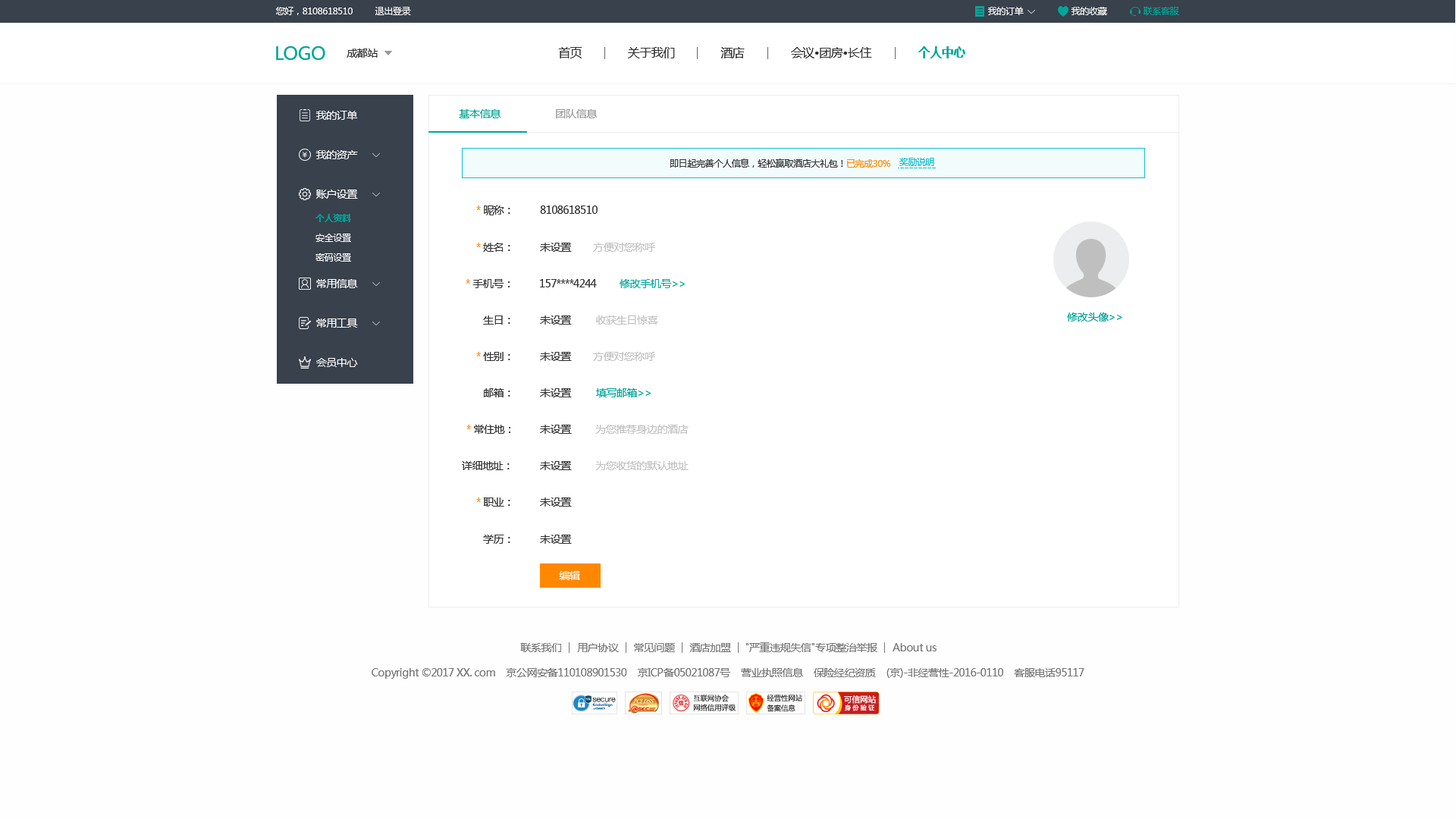
<style>
.page{position:relative;width:1456px;height:819px;background:#fefefe}
.page>*{position:absolute;margin:0}
.t1{font:9.1px "MicrosoftYaHei";letter-spacing:-0.03em;color:#ffffff}
.t2{font:9.1px "MicrosoftYaHei";letter-spacing:-0.03em;color:#00a699}
.t3{font:18.2px "MicrosoftYaHei";letter-spacing:-0.03em;color:#00a699}
.t4{font:10.6px "MicrosoftYaHei";letter-spacing:-0.03em;color:#333333}
.t5{font:12.1px "MicrosoftYaHei";letter-spacing:-0.03em;color:#333333}
.t6{font:12.1px "MicrosoftYaHei-Bold";letter-spacing:-0.03em;color:#00a699}
.t7{font:10.6px "MicrosoftYaHei";letter-spacing:-0.03em;color:#ffffff}
.t8{font:10.6px "MicrosoftYaHei";letter-spacing:-0.03em;color:#00a699}
.t9{font:10.6px "MicrosoftYaHei";letter-spacing:-0.03em;color:#999999}
.t10{font:9.1px "MicrosoftYaHei";letter-spacing:-0.03em;color:#333333}
.t11{font:9.1px "MicrosoftYaHei";letter-spacing:-0.03em;color:#ff8800}
.t12{font:9.1px "MicrosoftYaHei";letter-spacing:-0.03em;color:#12bccc}
.t13{font:10.6px "MicrosoftYaHei";letter-spacing:-0.03em;color:#ff8800}
.t14{font:9.1px "MicrosoftYaHei-Bold";letter-spacing:-0.03em;color:#00a699}
.t15{font:9.1px "MicrosoftYaHei";letter-spacing:-0.03em;color:#fefefe}
.t16{font:10.6px "MicrosoftYaHei";letter-spacing:-0.03em;color:#c0c1c2}
.t17{font:10.6px "MicrosoftYaHei";letter-spacing:-0.03em;color:#777777}
</style>
<div class="page">
<p class="t1" style="left:276px;top:7px;width:77px;height:8px">您好，8108618510</p>
<p class="t1" style="left:375px;top:7px;width:36px;height:8px">退出登录</p>
<p class="t1" style="left:987px;top:7px;width:37px;height:8px">我的订单</p>
<p class="t1" style="left:1071px;top:7px;width:36px;height:8px">我的收藏</p>
<p class="t2" style="left:1144px;top:7px;width:35px;height:8px">联系客服</p>
<p class="t3" style="left:276px;top:46px;width:49px;height:14px">LOGO</p>
<p class="t4" style="left:347px;top:49px;width:31px;height:9px">成都站</p>
<p class="t5" style="left:558px;top:47px;width:24px;height:11px">首页</p>
<p class="t5" style="left:628px;top:47px;width:47px;height:11px">关于我们</p>
<p class="t5" style="left:720px;top:47px;width:25px;height:11px">酒店</p>
<p class="t5" style="left:791px;top:47px;width:81px;height:11px">会议•团房•长住</p>
<p class="t6" style="left:918px;top:46px;width:47px;height:12px">个人中心</p>
<p class="t7" style="left:315px;top:111px;width:43px;height:9px">我的订单</p>
<p class="t8" style="left:459px;top:109px;width:42px;height:9px">基本信息</p>
<p class="t9" style="left:556px;top:109px;width:42px;height:9px">团队信息</p>
<p class="t7" style="left:315px;top:150px;width:43px;height:9px">我的资产</p>
<p class="t10" style="left:670px;top:158px;width:221px;height:10px">即日起完善个人信息，轻松赢取酒店大礼包！<span class="t11">已完成30%</span></p>
<p class="t12" style="left:899px;top:158px;width:35px;height:8px">奖励说明</p>
<p class="t7" style="left:316px;top:190px;width:42px;height:9px">账户设置</p>
<p class="t4" style="left:476px;top:206px;width:34px;height:9px"><span class="t13">* </span>昵称：</p>
<p class="t4" style="left:540px;top:206px;width:58px;height:8px">8108618510</p>
<p class="t14" style="left:315px;top:214px;width:36px;height:8px">个人资料</p>
<p class="t15" style="left:315px;top:234px;width:36px;height:8px">安全设置</p>
<p class="t4" style="left:476px;top:243px;width:34px;height:9px"><span class="t13">* </span>姓名：</p>
<p class="t4" style="left:540px;top:243px;width:32px;height:9px">未设置</p>
<p class="t16" style="left:593px;top:243px;width:62px;height:9px">方便对您称呼</p>
<p class="t15" style="left:315px;top:253px;width:36px;height:9px">密码设置</p>
<p class="t7" style="left:316px;top:279px;width:42px;height:9px">常用信息</p>
<p class="t4" style="left:466px;top:279px;width:44px;height:9px"><span class="t13">* </span>手机号：</p>
<p class="t4" style="left:540px;top:279px;width:57px;height:8px">157****4244</p>
<p class="t8" style="left:620px;top:279px;width:66px;height:9px">修改手机号&gt;&gt;</p>
<p class="t4" style="left:483px;top:315px;width:27px;height:10px">生日：</p>
<p class="t4" style="left:540px;top:315px;width:32px;height:10px">未设置</p>
<p class="t16" style="left:596px;top:315px;width:62px;height:10px">收获生日惊喜</p>
<p class="t8" style="left:1067px;top:312px;width:55px;height:10px">修改头像&gt;&gt;</p>
<p class="t7" style="left:316px;top:318px;width:42px;height:10px">常用工具</p>
<p class="t4" style="left:476px;top:352px;width:34px;height:9px"><span class="t13">* </span>性别：</p>
<p class="t4" style="left:540px;top:352px;width:32px;height:9px">未设置</p>
<p class="t16" style="left:593px;top:352px;width:62px;height:9px">方便对您称呼</p>
<p class="t7" style="left:316px;top:358px;width:42px;height:9px">会员中心</p>
<p class="t4" style="left:484px;top:388px;width:26px;height:9px">邮箱：</p>
<p class="t4" style="left:540px;top:388px;width:32px;height:9px">未设置</p>
<p class="t8" style="left:596px;top:388px;width:55px;height:9px">填写邮箱&gt;&gt;</p>
<p class="t4" style="left:466px;top:425px;width:44px;height:9px"><span class="t13">* </span>常住地：</p>
<p class="t4" style="left:540px;top:425px;width:32px;height:9px">未设置</p>
<p class="t16" style="left:595px;top:425px;width:94px;height:9px">为您推荐身边的酒店</p>
<p class="t4" style="left:462px;top:461px;width:48px;height:9px">详细地址：</p>
<p class="t4" style="left:540px;top:461px;width:32px;height:9px">未设置</p>
<p class="t16" style="left:595px;top:461px;width:94px;height:9px">为您收货的默认地址</p>
<p class="t4" style="left:476px;top:497px;width:34px;height:10px"><span class="t13">* </span>职业：</p>
<p class="t4" style="left:540px;top:497px;width:32px;height:10px">未设置</p>
<p class="t4" style="left:483px;top:535px;width:27px;height:9px">学历：</p>
<p class="t4" style="left:540px;top:535px;width:32px;height:9px">未设置</p>
<p class="t7" style="left:559px;top:571px;width:21px;height:9px">编辑</p>
<p class="t17" style="left:520px;top:643px;width:41px;height:9px">联系我们</p>
<p class="t17" style="left:577px;top:643px;width:42px;height:9px">用户协议</p>
<p class="t17" style="left:634px;top:643px;width:41px;height:9px">常见问题</p>
<p class="t17" style="left:689px;top:643px;width:42px;height:9px">酒店加盟</p>
<p class="t17" style="left:745px;top:642px;width:132px;height:10px">"严重违规失信"专项整治举报</p>
<p class="t17" style="left:893px;top:643px;width:44px;height:8px">About us</p>
<p class="t17" style="left:372px;top:668px;width:712px;height:11px">Copyright ©2017 XX. com    京公网安备110108901530    京ICP备05021087号    营业执照信息    保险经纪资质    (京)-非经营性-2016-0110    客服电话95117</p>
</div>
